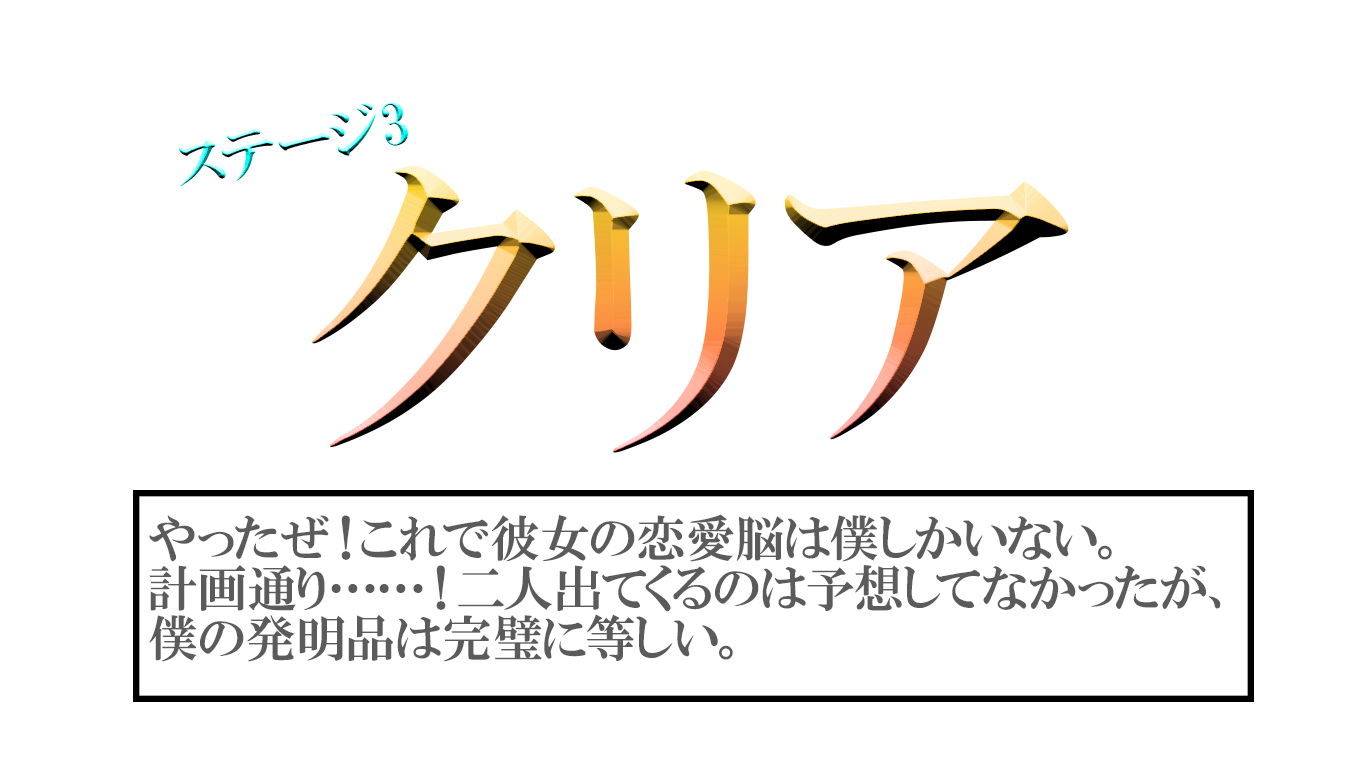
<style>
.page{position:relative;width:1366px;height:768px;background:#ffffff}
.page>*{position:absolute;margin:0}
.t1{font:58.4px "HGPMinchoE"}
.t2{font:326.3px "HGPMinchoE"}
.t3{font:50px/50px "HGPMinchoE";color:#5b5b5b}
</style>
<div class="page">
<p class="t1" style="left:179px;top:102px;width:229px;height:85px;rotate:-11deg">ステージ3</p>
<p class="t2" style="left:312px;top:166px;width:757px;height:287px">クリア</p>
<p class="t3" style="left:149px;top:514px;width:1072px;height:148px">やったぜ！これで彼女の恋愛脳は僕しかいない。<br>計画通り……！二人出てくるのは予想してなかったが、僕の発明品は完璧に等しい。</p>
</div>
